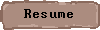
<style>
.page{position:relative;width:100px;height:30px;background:#ab8c7f}
.page>*{position:absolute;margin:0}
.t1{font:13px "Terminal";letter-spacing:0.04em;color:#000000}
</style>
<div class="page">
<p class="t1" style="left:24px;top:9px;width:49px;height:9px">Resume</p>
</div>
